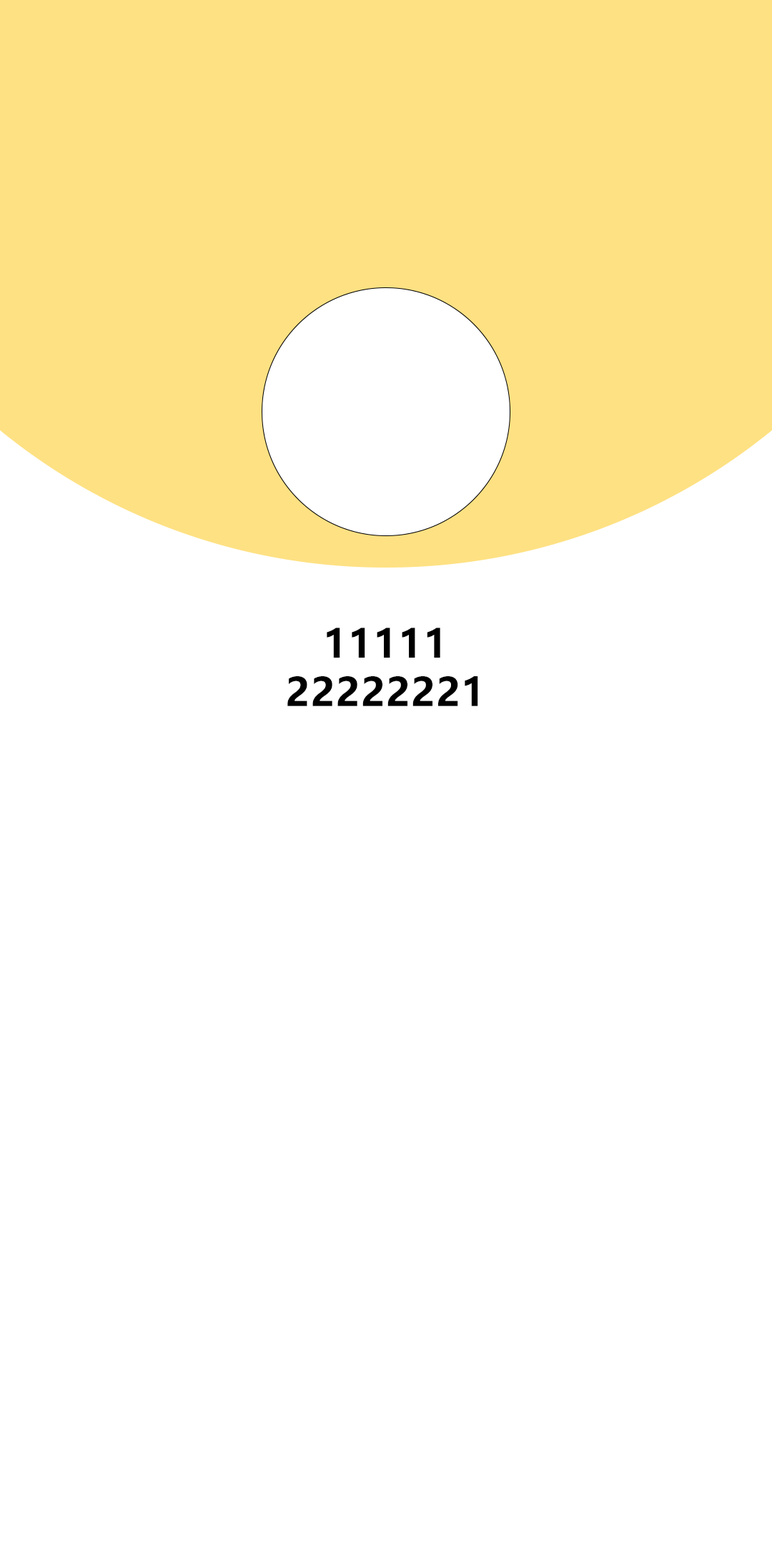
<style>
.page{position:relative;width:772px;height:1544px;background:#ffffff}
.page>*{position:absolute;margin:0}
.t1{font:38.8px "MicrosoftYaHei-Bold";letter-spacing:0.03em;color:#000000}
</style>
<div class="page">
<p class="t1" style="left:287px;top:628px;width:191px;height:78px;text-align:center">11111<br>22222221</p>
</div>
